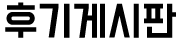
<style>
.page{position:relative;width:181px;height:41px;background:#ffffff}
.page>*{position:absolute;margin:0}
.t1{font:36px "BMDoHyeon";color:#000000}
</style>
<div class="page">
<p class="t1" style="left:5px;top:2px;width:171px;height:36px">후기게시판</p>
</div>
